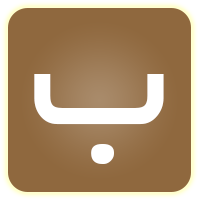
<style>
.page{position:relative;width:200px;height:200px;background:#8f683e}
.page>*{position:absolute;margin:0}
.t1{font:180.1px "BYekan";color:#ffffff}
</style>
<div class="page">
<p class="t1" style="left:34px;top:74px;width:130px;height:90px">ب</p>
</div>
